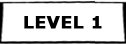
<style>
.page{position:relative;width:126px;height:44px;background:#ffffff}
.page>*{position:absolute;margin:0}
.t1{font:17.4px "Verdana-Bold";color:#000000;font-weight:bold}
.t2{font:17.4px "Verdana-Bold";letter-spacing:-0.04em;color:#000000;font-weight:bold}
</style>
<div class="page">
<p class="t1" style="left:24px;top:16px;width:78px;height:13px">LEVEL <span class="t2">1</span></p>
</div>
